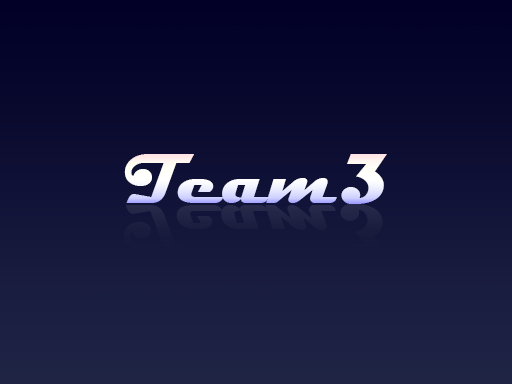
<style>
.page{position:relative;width:512px;height:384px}
.page>*{position:absolute;margin:0}
.t1{font:72px "Magneto-Bold"}
</style>
<div class="page">
<p class="t1" style="left:124px;top:154px;width:263px;height:50px">Team3</p>
</div>
